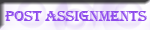
<style>
.page{position:relative;width:150px;height:30px}
.page>*{position:absolute;margin:0}
.t1{font:15px "Algerian";letter-spacing:-0.025em;color:#8f4bec;scale:1.08 1}
</style>
<div class="page">
<p class="t1" style="left:5px;top:10px;width:142px;height:11px">POST ASSIGNMENTS</p>
</div>
